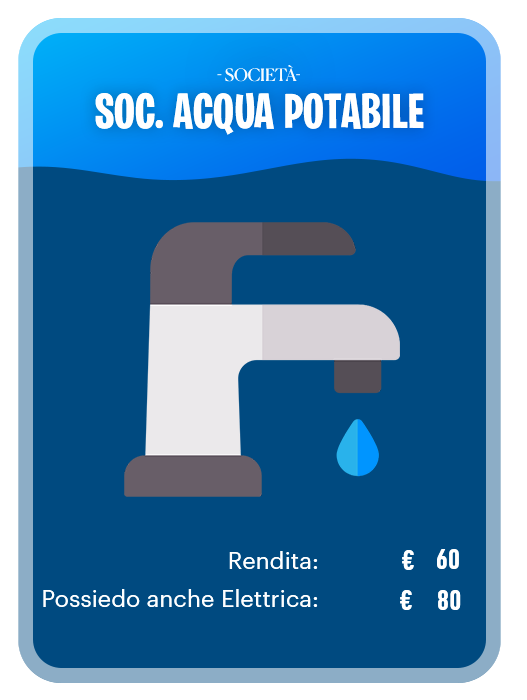
<style>
.page{position:relative;width:527px;height:700px;background:#004a80}
.page>*{position:absolute;margin:0}
.t1{font:16.5px "Canela-Regular";letter-spacing:0.01em;color:#ffffff;text-transform:uppercase}
.t2{font:49.3px "BurbankBigCondensed-Bold";letter-spacing:0.01em;color:#ffffff}
.t3{font:23.2px "Graphik-Regular";letter-spacing:0.01em;color:#ffffff}
.t4{font:29.4px "D-DINCondensed-Bold";letter-spacing:0.01em;color:#ffffff}
</style>
<div class="page">
<p class="t1" style="left:217px;top:65px;width:83px;height:17px;opacity:0.97">- SOCIETà-</p>
<p class="t2" style="left:95px;top:92px;width:329px;height:43px">SOC. ACQUA POTABILE</p>
<p class="t3" style="left:229px;top:551px;width:89px;height:18px">Rendita:</p>
<p class="t4" style="left:402px;top:550px;width:12px;height:20px">€</p>
<p class="t4" style="left:437px;top:549px;width:22px;height:20px">60</p>
<p class="t3" style="left:43px;top:589px;width:275px;height:18px">Possiedo anche Elettrica:</p>
<p class="t4" style="left:400px;top:590px;width:12px;height:20px">€</p>
<p class="t4" style="left:438px;top:590px;width:23px;height:20px">80</p>
</div>
